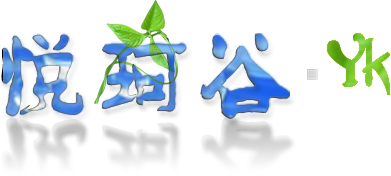
<style>
.page{position:relative;width:391px;height:176px;background:#ffffff}
.page>*{position:absolute;margin:0}
.t1{font:101.1px "FZPHTJW--GB1-0"}
.t2{font:72px "FZPHTJW--GB1-0"}
.t3{font:101.1px "FZPHTJW--GB1-0";color:#d4d4d4}
</style>
<div class="page">
<p class="t1" style="left:1px;top:34px;width:289px;height:85px">悦珂谷</p>
<p class="t2" style="left:327px;top:33px;width:63px;height:62px">Yk</p>
<p class="t3" style="left:1px;top:115px;width:289px;height:61px">悦珂谷</p>
</div>
